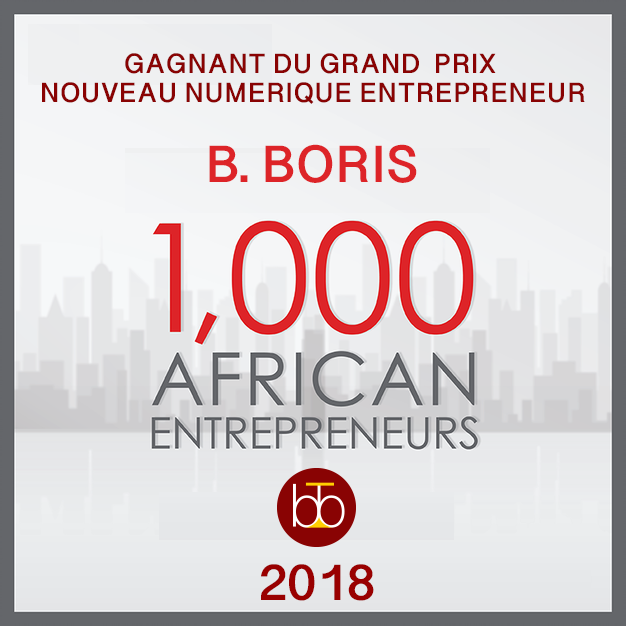
<style>
.page{position:relative;width:626px;height:626px}
.page>*{position:absolute;margin:0}
.t1{font:24.3px "OriyaSangamMN-Bold";color:#890303}
.t2{font:45.5px "OriyaSangamMN-Bold";color:#dd2428}
.t3{font:45.5px "OriyaSangamMN-Bold";color:#990000}
</style>
<div class="page">
<p class="t1" style="left:42px;top:53px;width:543px;height:51px;text-align:center">GAGNANT DU GRAND  PRIX <br>NOUVEAU NUMERIQUE ENTREPRENEUR</p>
<p class="t2" style="left:209px;top:144px;width:208px;height:39px">B. BORIS</p>
<p class="t3" style="left:261px;top:564px;width:113px;height:37px">2018</p>
</div>
